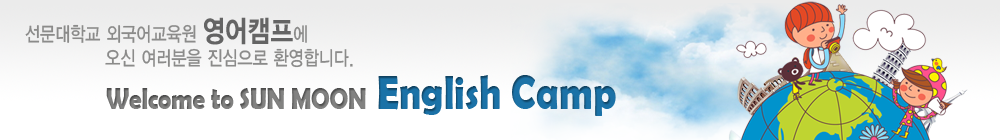
<style>
.page{position:relative;width:1000px;height:140px}
.page>*{position:absolute;margin:0}
.t1{font:20px "YDIYGO330";color:#8b8b8a;scale:0.82 1}
.t2{font:30px "YDIYGO350";color:#646464;scale:0.82 1}
.t3{font:30px "BerlinSansFBDemi-Bold";color:#828281;scale:0.82 1}
.t4{font:48px "BerlinSansFBDemi-Bold";color:#1b72a7;scale:0.82 1}
</style>
<div class="page">
<p class="t1" style="left:25px;top:17px;width:328px;height:51px">선문대학교 외국어교육원 <span class="t2">영어캠프</span>에<br>              오신 여러분을 진심으로 환영합니다.</p>
<p class="t3" style="left:106px;top:75px;width:510px;height:41px">Welcome to SUN MOON <span class="t4">English Camp</span></p>
</div>
